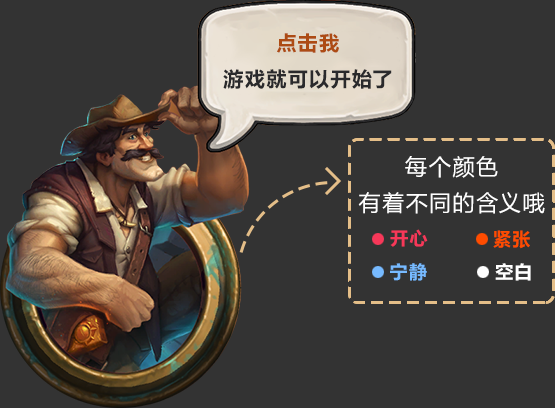
<style>
.page{position:relative;width:555px;height:408px;background:#333333}
.page>*{position:absolute;margin:0}
.t1{font:22px/36px "MicrosoftYaHei";letter-spacing:0.065em;color:#ffffff}
.t2{font:18px "MicrosoftYaHei-Bold";letter-spacing:0.065em;color:#f73859}
.t3{font:18px "MicrosoftYaHei-Bold";letter-spacing:0.065em;color:#ff4c00}
.t4{font:18px "MicrosoftYaHei-Bold";letter-spacing:0.065em;color:#77baff}
.t5{font:18px "MicrosoftYaHei-Bold";letter-spacing:0.065em;color:#ffffff}
</style>
<div class="page">
<p class="t1" style="left:358px;top:156px;width:187px;height:58px;text-align:center">每个颜色<br>有着不同的含义哦</p>
<p class="t2" style="left:390px;top:229px;width:38px;height:18px">开心</p>
<p class="t3" style="left:493px;top:230px;width:37px;height:19px">紧张</p>
<p class="t4" style="left:390px;top:263px;width:37px;height:18px">宁静</p>
<p class="t5" style="left:495px;top:263px;width:36px;height:18px">空白</p>
</div>
